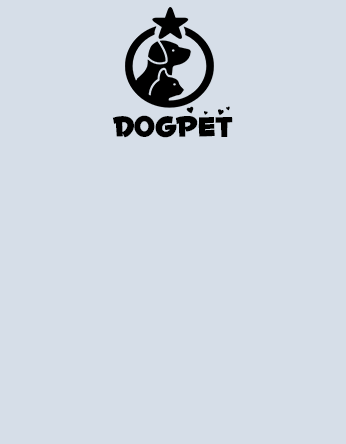
<style>
.page{position:relative;width:346px;height:444px;background:#d6dee8}
.page>*{position:absolute;margin:0}
.t1{font:33.6px "FontdinerdotcomLuvable";color:#000000}
</style>
<div class="page">
<p class="t1" style="left:112px;top:106px;width:121px;height:32px">DOGPET</p>
</div>
